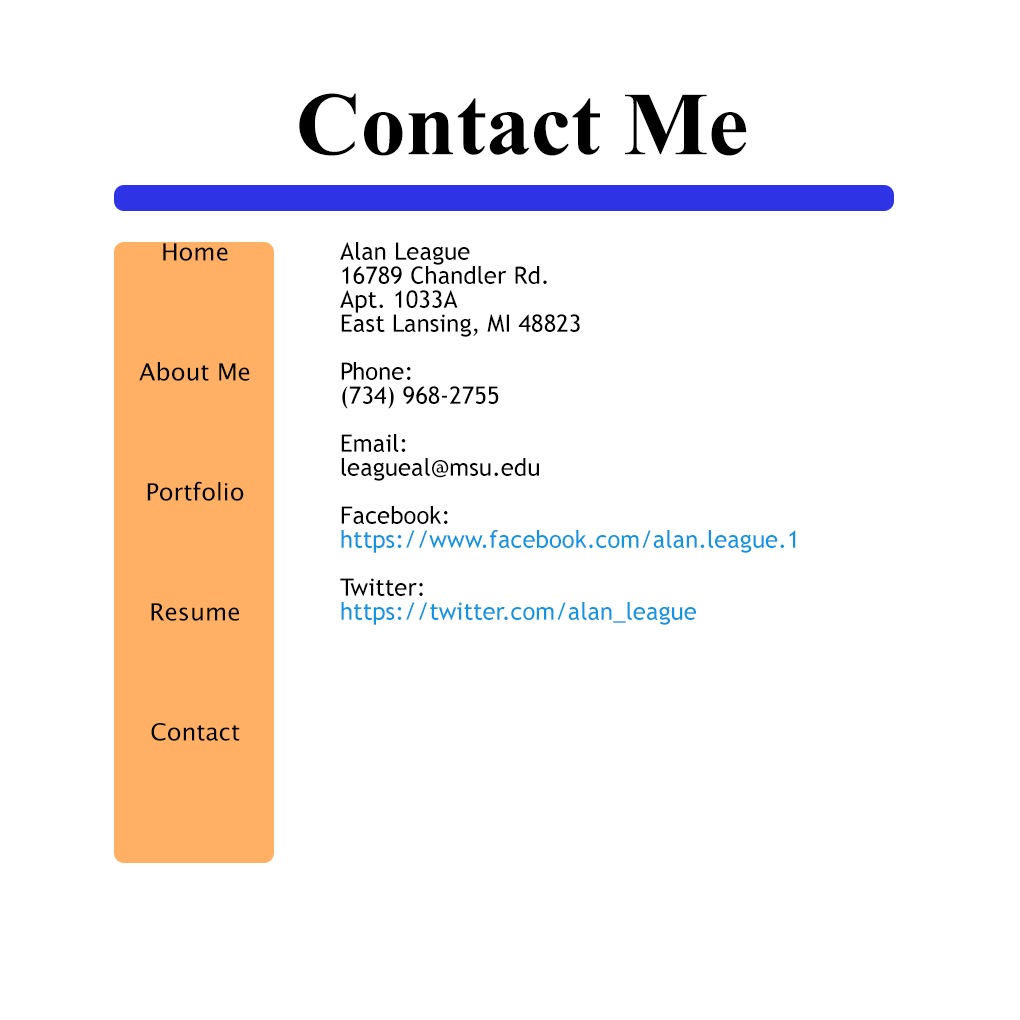
<style>
.page{position:relative;width:1020px;height:1020px;background:#ffffff}
.page>*{position:absolute;margin:0}
.t1{font:90px "TimesNewRomanPS-BoldMT";color:#000000}
.t2{font:24px/24px "LucidaSansUnicode";color:#000000}
.t3{font:24px/24px "TrebuchetMS";color:#000000}
.t4{font:24px/24px "TrebuchetMS";color:#000203}
.t5{font:24px/24px "TrebuchetMS";color:#0f95e3}
</style>
<div class="page">
<p class="t1" style="left:299px;top:93px;width:448px;height:63px">Contact Me</p>
<p class="t2" style="left:139px;top:243px;width:111px;height:498px;text-align:center">Home<br><br><br><br><br>About Me<br><br><br><br><br>Portfolio<br><br><br><br><br>Resume<br><br><br><br><br>Contact</p>
<p class="t3" style="left:340px;top:242px;width:456px;height:383px">Alan League<br>16789 Chandler Rd.<br>Apt. 1033A<br>East Lansing, MI 48823<br><br>Phone:<br>(734) 968-2755<br><br>Email:<br><span class="t4">leagueal@msu.edu<br><br>Facebook:<br></span><span class="t5">https://www.facebook.com/alan.league.1<br><br></span>Twitter:<br><span class="t5">https://twitter.com/alan_league</span></p>
</div>
